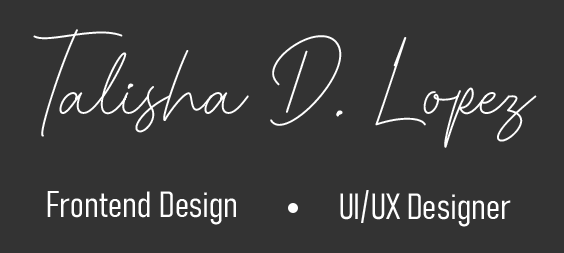
<style>
.page{position:relative;width:564px;height:253px;background:#333333}
.page>*{position:absolute;margin:0}
.t1{font:100px "LuthonSouthardScript";color:#ffffff}
.t2{font:36px "Bahnschrift-LightCondensed";color:#ffffff}
</style>
<div class="page">
<p class="t1" style="left:33px;top:29px;width:504px;height:119px">Talisha D. Lopez</p>
<p class="t2" style="left:47px;top:191px;width:189px;height:34px">Frontend Design</p>
<p class="t2" style="left:340px;top:190px;width:171px;height:37px">UI/UX Designer</p>
</div>
